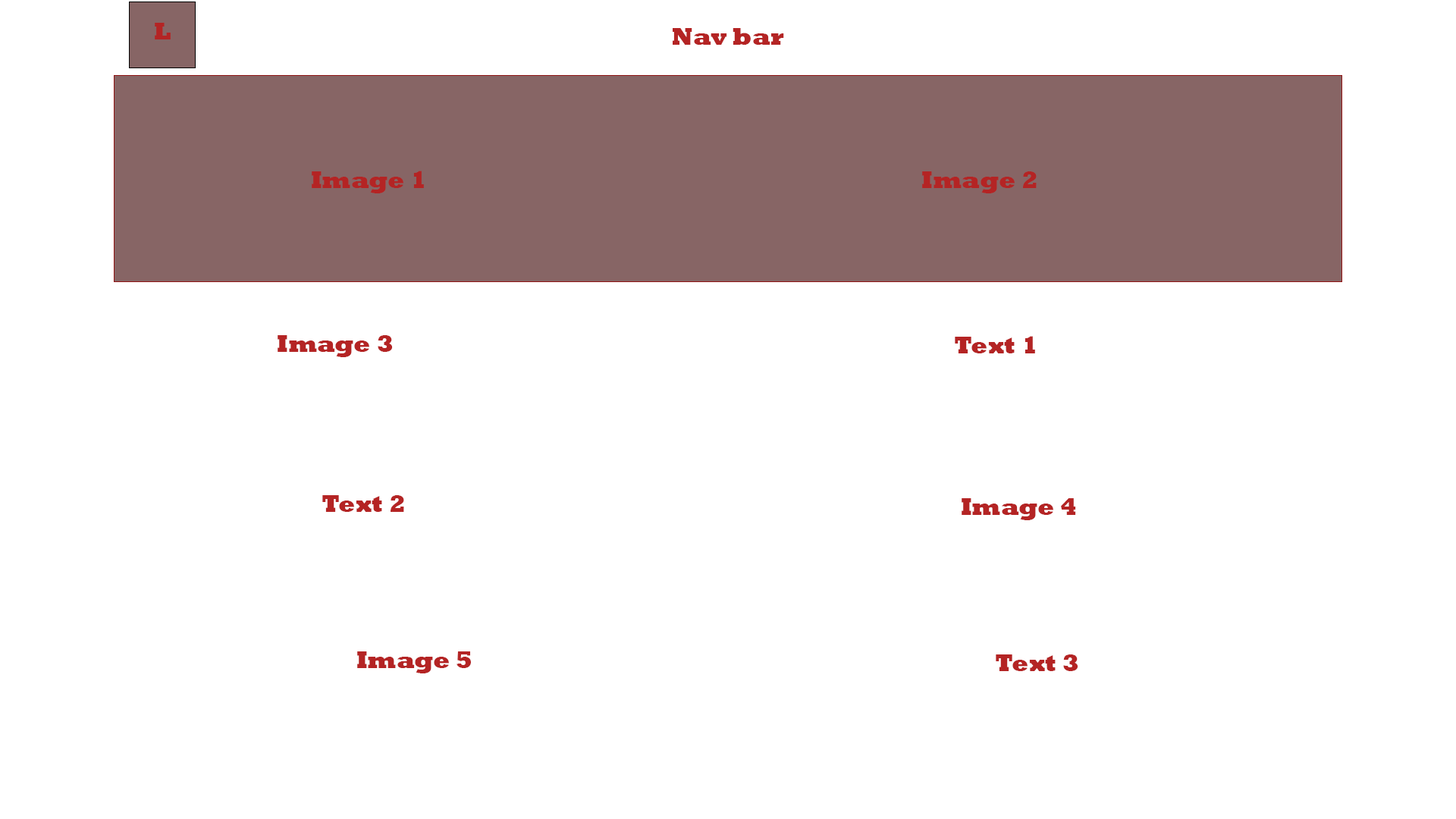
<style>
.page{position:relative;width:1456px;height:819px;background:#ffffff}
.page>*{position:absolute;margin:0}
.t1{font:24.3px "Rockwell-ExtraBold";color:#b42424}
</style>
<div class="page">
<p class="t1" style="left:155px;top:23px;width:16px;height:16px">L</p>
<p class="t1" style="left:673px;top:28px;width:111px;height:17px">Nav bar</p>
<p class="t1" style="left:312px;top:171px;width:112px;height:22px">Image 1</p>
<p class="t1" style="left:922px;top:171px;width:115px;height:22px">Image 2</p>
<p class="t1" style="left:278px;top:335px;width:115px;height:22px">Image 3</p>
<p class="t1" style="left:955px;top:336px;width:80px;height:17px">Text 1</p>
<p class="t1" style="left:322px;top:495px;width:82px;height:17px">Text 2</p>
<p class="t1" style="left:962px;top:498px;width:114px;height:22px">Image 4</p>
<p class="t1" style="left:357px;top:651px;width:114px;height:22px">Image 5</p>
<p class="t1" style="left:996px;top:654px;width:82px;height:17px">Text 3</p>
</div>
